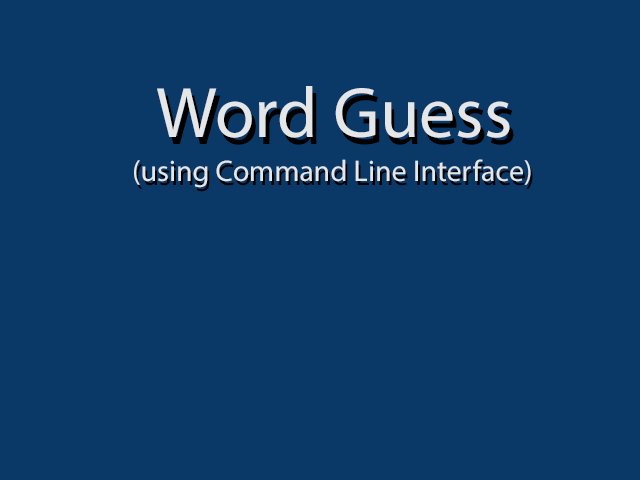
<style>
.page{position:relative;width:640px;height:480px;background:#0b3967}
.page>*{position:absolute;margin:0}
.t1{font:72px "MyriadPro-Regular";color:#e4e6e8}
.t2{font:72px "MyriadPro-Regular";color:#000000}
.t3{font:30px "MyriadPro-Regular";color:#e4e6e8}
.t4{font:30px "MyriadPro-Regular";color:#000000}
</style>
<div class="page">
<p class="t1" style="left:157px;top:86px;width:353px;height:52px">Word Guess</p>
<p class="t2" style="left:161px;top:93px;width:353px;height:52px">Word Guess</p>
<p class="t3" style="left:134px;top:159px;width:397px;height:29px">(using Command Line Interface)</p>
<p class="t4" style="left:136px;top:163px;width:397px;height:29px"><span class="t3"> </span>(using Command Line Interface)</p>
</div>
